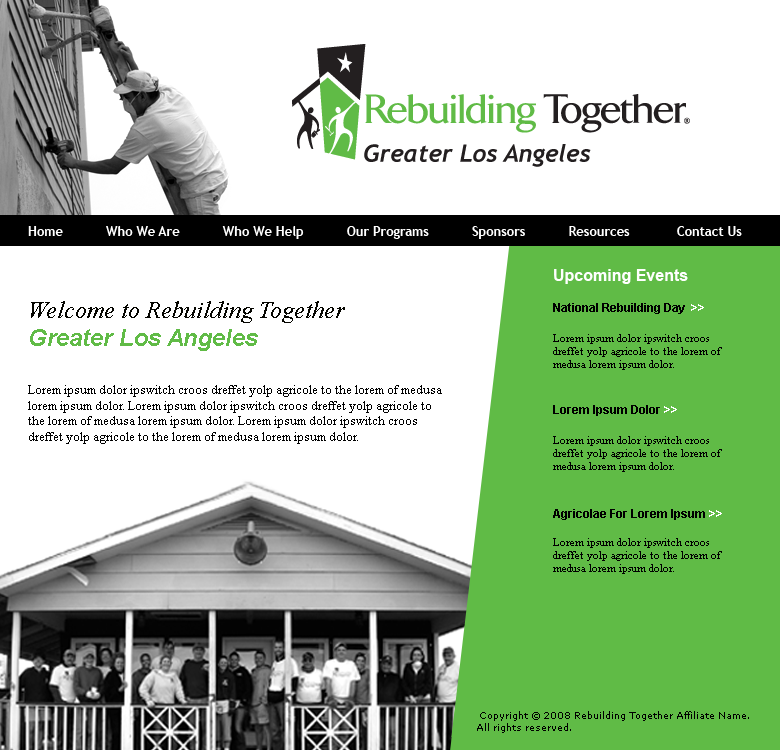
<style>
.page{position:relative;width:780px;height:750px;background:#ffffff}
.page>*{position:absolute;margin:0}
.t1{font:13px "TrebuchetMS-Bold";color:#ffffff}
.t2{font:16px "Arial-BoldMT";color:#ffffff}
.t3{font:24px/28px "TimesNewRomanPS-ItalicMT";color:#050500}
.t4{font:24px/28px "Arial-BoldItalicMT";color:#60bb46}
.t5{font:12px "Arial-BoldMT";color:#000000}
.t6{font:12px "Arial-BoldMT";color:#ffffff}
.t7{font:11px "TimesNewRomanPSMT";color:#000000}
.t8{font:13px "TimesNewRomanPSMT";color:#000000}
.t9{font:9px/12px "Verdana";color:#000000}
</style>
<div class="page">
<p class="t1" style="left:28px;top:226px;width:714px;height:13px">Home           Who We Are           Who We Help           Our Programs           Sponsors           Resources            Contact Us</p>
<p class="t2" style="left:554px;top:269px;width:134px;height:15px">Upcoming Events</p>
<p class="t3" style="left:30px;top:301px;width:315px;height:50px">Welcome to Rebuilding Together <br><span class="t4">Greater Los Angeles</span></p>
<p class="t5" style="left:553px;top:303px;width:151px;height:11px">National Rebuilding Day  <span class="t6">&gt;&gt;</span></p>
<p class="t7" style="left:553px;top:334px;width:169px;height:36px">Lorem ipsum dolor ipswitch croos dreffet yolp agricole to the lorem of medusa lorem ipsum dolor.</p>
<p class="t8" style="left:28px;top:385px;width:414px;height:59px">Lorem ipsum dolor ipswitch croos dreffet yolp agricole to the lorem of medusa lorem ipsum dolor. Lorem ipsum dolor ipswitch croos dreffet yolp agricole to the lorem of medusa lorem ipsum dolor. Lorem ipsum dolor ipswitch croos dreffet yolp agricole to the lorem of medusa lorem ipsum dolor.</p>
<p class="t5" style="left:553px;top:405px;width:124px;height:11px">Lorem Ipsum Dolor <span class="t6">&gt;&gt;</span></p>
<p class="t7" style="left:553px;top:436px;width:169px;height:36px">Lorem ipsum dolor ipswitch croos dreffet yolp agricole to the lorem of medusa lorem ipsum dolor.</p>
<p class="t5" style="left:553px;top:509px;width:169px;height:11px">Agricolae For Lorem Ipsum <span class="t6">&gt;&gt;</span></p>
<p class="t7" style="left:553px;top:538px;width:169px;height:36px">Lorem ipsum dolor ipswitch croos dreffet yolp agricole to the lorem of medusa lorem ipsum dolor.</p>
<p class="t9" style="left:477px;top:711px;width:272px;height:22px">Copyright © 2008 Rebuilding Together Affiliate Name.  <br>All rights reserved.</p>
</div>
